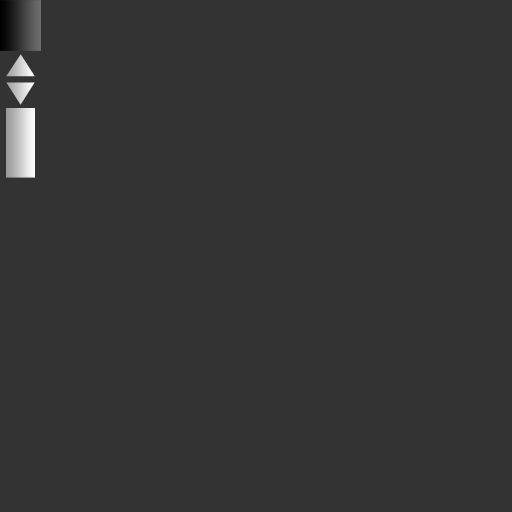
<style>
.page{position:relative;width:512px;height:512px;background:#333333}
.page>*{position:absolute;margin:0}
.t1{font:35px "MalgunGothicRegular";letter-spacing:0.03em}
</style>
<div class="page">
<p class="t1" style="left:6px;top:54px;width:29px;height:23px">▲</p>
<p class="t1" style="left:6px;top:82px;width:29px;height:23px">▼</p>
</div>
